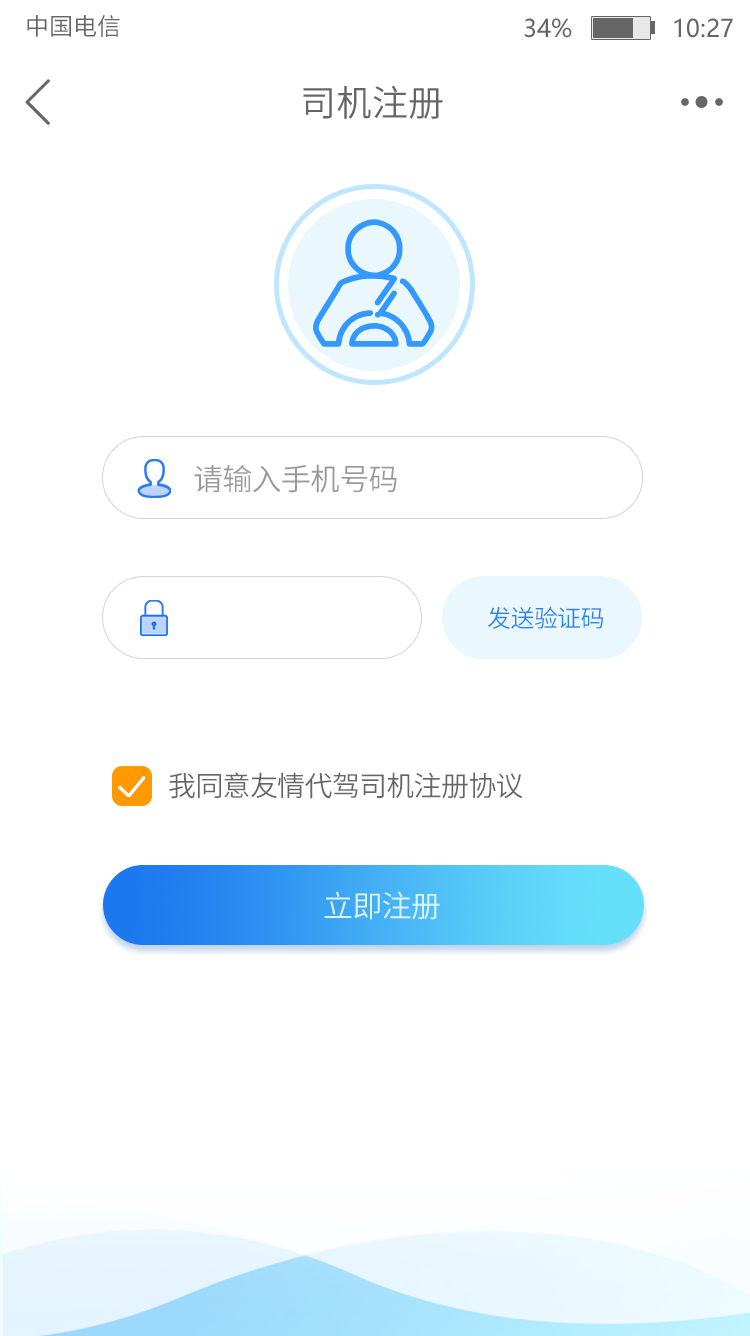
<style>
.page{position:relative;width:750px;height:1336px;background:#ffffff}
.page>*{position:absolute;margin:0}
.t1{font:24px "SourceHanSansCN-Normal";color:#666666}
.t2{font:24px "MicrosoftYaHei";color:#666666}
.t3{font:36px "SourceHanSansCN-Normal";color:#666666}
.t4{font:30px "SourceHanSansCN-Normal";letter-spacing:-0.025em;color:#999999}
.t5{font:24px "SourceHanSansCN-Normal";letter-spacing:-0.025em;color:#2585f0}
.t6{font:28px "SourceHanSansCN-Normal";letter-spacing:-0.025em;color:#666666}
.t7{font:30px "SourceHanSansCN-Normal";letter-spacing:-0.025em;color:#daf2f9}
</style>
<div class="page">
<p class="t1" style="left:27px;top:15px;width:93px;height:22px">中国电信</p>
<p class="t2" style="left:524px;top:18px;width:209px;height:20px">34%              10:27</p>
<p class="t3" style="left:303px;top:85px;width:140px;height:34px">司机注册</p>
<p class="t4" style="left:194px;top:464px;width:203px;height:29px">请输入手机号码</p>
<p class="t5" style="left:487px;top:606px;width:116px;height:23px">发送验证码</p>
<p class="t6" style="left:169px;top:772px;width:354px;height:27px">我同意友情代驾司机注册协议</p>
<p class="t7" style="left:324px;top:891px;width:116px;height:29px">立即注册</p>
</div>
